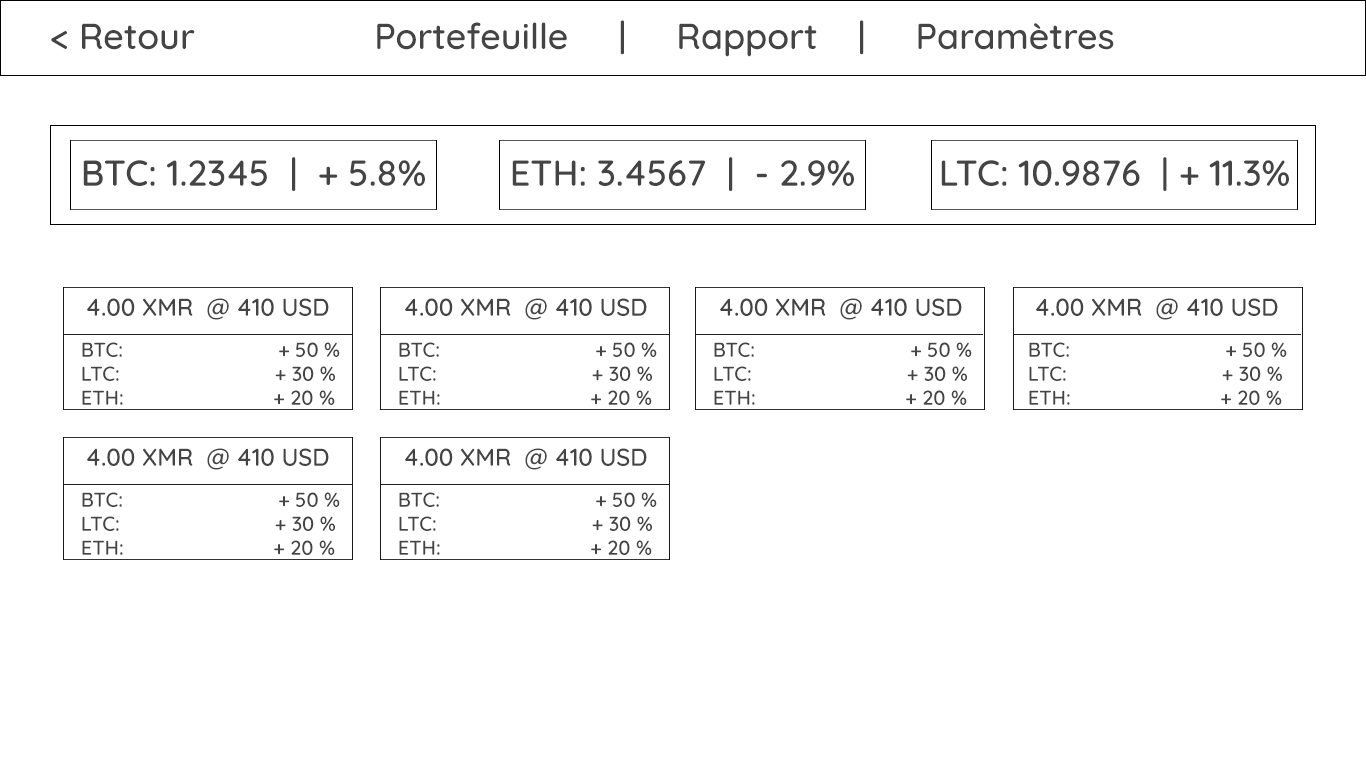
<style>
.page{position:relative;width:1366px;height:768px;background:#ffffff}
.page>*{position:absolute;margin:0}
.t1{font:36px "Quicksand-Medium";color:#444444}
.t2{font:24px "Quicksand-Medium";color:#444444}
.t3{font:20px "Quicksand-Medium";color:#444444}
</style>
<div class="page">
<p class="t1" style="left:51px;top:20px;width:1063px;height:37px">&lt; Retour                  Portefeuille     |     Rapport    |     Paramètres</p>
<p class="t1" style="left:83px;top:157px;width:342px;height:34px">BTC: 1.2345  |  + 5.8%</p>
<p class="t1" style="left:512px;top:157px;width:342px;height:34px">ETH: 3.4567  |  - 2.9%</p>
<p class="t1" style="left:941px;top:157px;width:348px;height:34px">LTC: 10.9876  | + 11.3%</p>
<p class="t2" style="left:87px;top:298px;width:242px;height:22px">4.00 XMR  @ 410 USD</p>
<p class="t2" style="left:405px;top:298px;width:242px;height:22px">4.00 XMR  @ 410 USD</p>
<p class="t2" style="left:720px;top:298px;width:242px;height:22px">4.00 XMR  @ 410 USD</p>
<p class="t2" style="left:1036px;top:298px;width:242px;height:22px">4.00 XMR  @ 410 USD</p>
<p class="t3" style="left:82px;top:342px;width:258px;height:63px">BTC:                            + 50 %<br>LTC:                            + 30 %<br>ETH:                           + 20 %</p>
<p class="t3" style="left:399px;top:342px;width:258px;height:63px">BTC:                            + 50 %<br>LTC:                            + 30 %<br>ETH:                           + 20 %</p>
<p class="t3" style="left:714px;top:342px;width:258px;height:63px">BTC:                            + 50 %<br>LTC:                            + 30 %<br>ETH:                           + 20 %</p>
<p class="t3" style="left:1029px;top:342px;width:258px;height:63px">BTC:                            + 50 %<br>LTC:                            + 30 %<br>ETH:                           + 20 %</p>
<p class="t2" style="left:87px;top:448px;width:242px;height:22px">4.00 XMR  @ 410 USD</p>
<p class="t2" style="left:405px;top:448px;width:242px;height:22px">4.00 XMR  @ 410 USD</p>
<p class="t3" style="left:82px;top:492px;width:258px;height:63px">BTC:                            + 50 %<br>LTC:                            + 30 %<br>ETH:                           + 20 %</p>
<p class="t3" style="left:399px;top:492px;width:258px;height:63px">BTC:                            + 50 %<br>LTC:                            + 30 %<br>ETH:                           + 20 %</p>
</div>
